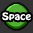
<style>
.page{position:relative;width:33px;height:33px;background:#333333}
.page>*{position:absolute;margin:0}
.t1{font:9px "M";color:#ffffff;scale:1.2 1}
</style>
<div class="page">
<p class="t1" style="left:2px;top:12px;width:29px;height:9px">Space</p>
</div>
